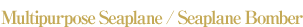
<style>
.page{position:relative;width:303px;height:27px;background:#ffffff}
.page>*{position:absolute;margin:0}
.t1{font:18px "RyuminPro-ExBold";letter-spacing:-0.08em;color:#c4a956;scale:0.97 1}
</style>
<div class="page">
<p class="t1" style="left:1px;top:10px;width:302px;height:17px">Multipurpose Seaplane / Seaplane Bomber</p>
</div>
